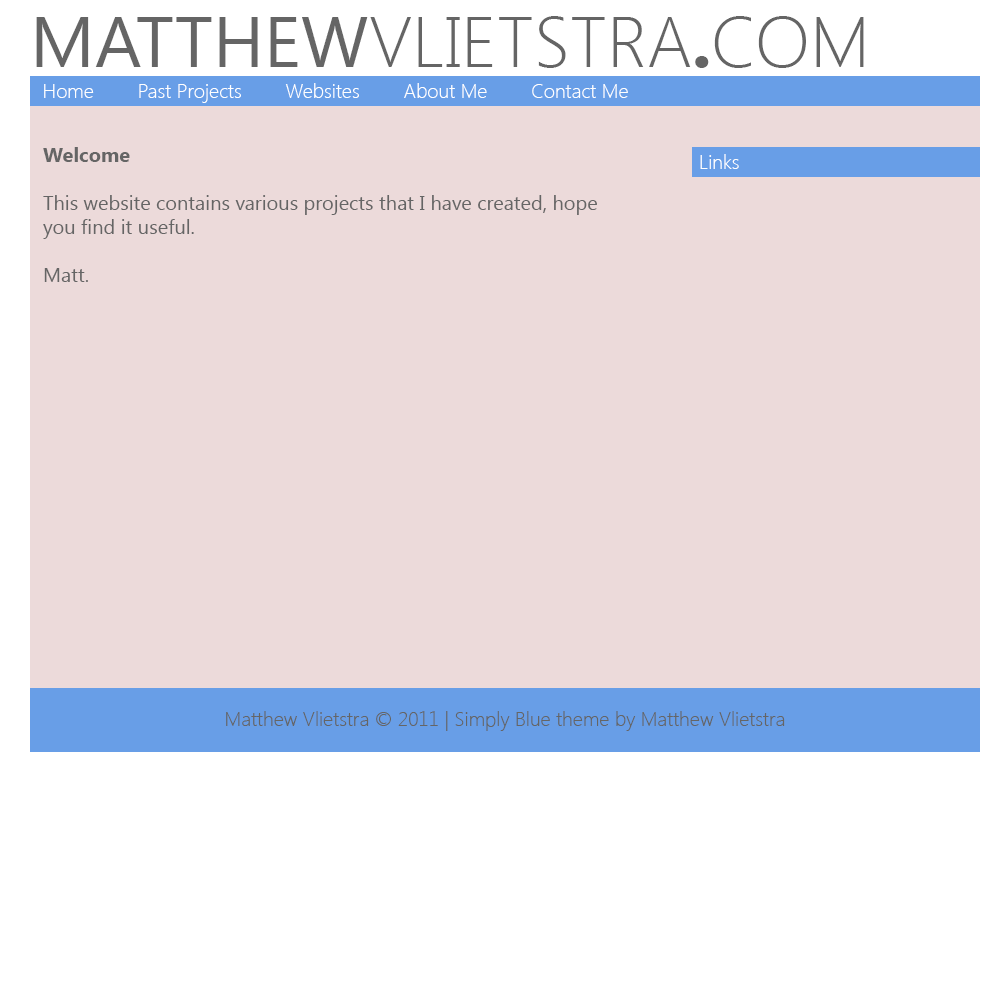
<style>
.page{position:relative;width:1000px;height:1000px;background:#ecdada}
.page>*{position:absolute;margin:0}
.t1{font:72px "SegoeUI-Light";color:#656565}
.t2{font:72px "SegoeUI";color:#656565}
.t3{font:72px "SegoeUI-Bold";color:#656565}
.t4{font:20px "SegoeUI-Light";color:#ffffff}
.t5{font:20px "SegoeUI-Bold";color:#656565}
.t6{font:20px "SegoeUI";color:#656565}
.t7{font:20px "SegoeUI-Light";color:#656565}
</style>
<div class="page">
<p class="t1" style="left:36px;top:16px;width:828px;height:52px"><span class="t2">MATTHEW</span>VLIETSTRA<span class="t3">.</span>COM</p>
<p class="t4" style="left:44px;top:83px;width:584px;height:20px">Home        Past Projects        Websites        About Me        Contact Me</p>
<p class="t5" style="left:43px;top:147px;width:87px;height:15px">Welcome</p>
<p class="t4" style="left:700px;top:154px;width:39px;height:15px">Links</p>
<p class="t6" style="left:43px;top:195px;width:554px;height:87px">This website contains various projects that I have created, hope you find it useful.<br><br>Matt.</p>
<p class="t7" style="left:226px;top:711px;width:559px;height:20px">Matthew Vlietstra © 2011 | Simply Blue theme by Matthew Vlietstra</p>
</div>
